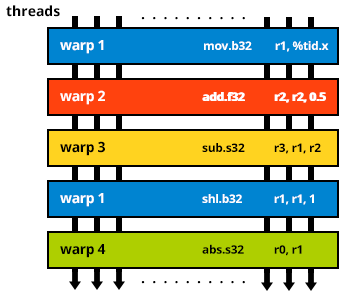
<style>
.page{position:relative;width:346px;height:297px;background:#ffffff}
.page>*{position:absolute;margin:0}
.t1{font:14px "OpenSans-Bold";color:#000000}
.t2{font:14px "OpenSans-Bold";letter-spacing:0.515em;color:#000000}
.t3{font:14px "OpenSans-Bold";letter-spacing:-0.025em;color:#ffffff}
.t4{font:12px "OpenSans-Bold";letter-spacing:-0.025em;color:#ffffff}
.t5{font:14px "OpenSans-Bold";letter-spacing:-0.025em;color:#000000}
.t6{font:12px "OpenSans-Bold";letter-spacing:-0.025em;color:#000000}
</style>
<div class="page">
<p class="t1" style="left:6px;top:5px;width:54px;height:12px">threads</p>
<p class="t2" style="left:141px;top:17px;width:104px;height:3px">..........</p>
<p class="t3" style="left:60px;top:40px;width:44px;height:14px">warp 1</p>
<p class="t4" style="left:204px;top:41px;width:125px;height:11px">mov.b32 r1, %tid.x</p>
<p class="t3" style="left:60px;top:90px;width:45px;height:15px">warp 2</p>
<p class="t4" style="left:202px;top:92px;width:123px;height:11px">add.f32 r2, r2, 0.5</p>
<p class="t4" style="left:203px;top:92px;width:123px;height:11px">add.f32 r2, r2, 0.5</p>
<p class="t5" style="left:60px;top:141px;width:45px;height:15px">warp 3</p>
<p class="t6" style="left:202px;top:143px;width:119px;height:11px">sub.s32  r3, r1, r2</p>
<p class="t3" style="left:60px;top:193px;width:44px;height:14px">warp 1</p>
<p class="t4" style="left:202px;top:194px;width:112px;height:11px">shl.b32 r1, r1, 1</p>
<p class="t5" style="left:60px;top:244px;width:46px;height:14px">warp 4</p>
<p class="t6" style="left:202px;top:244px;width:100px;height:12px">abs.s32 r0, r1</p>
<p class="t2" style="left:141px;top:281px;width:104px;height:3px">..........</p>
</div>
